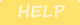
<style>
.page{position:relative;width:80px;height:25px}
.page>*{position:absolute;margin:0}
.t1{font:16px "SegoeScript-Bold";color:#fff5d9}
</style>
<div class="page">
<p class="t1" style="left:18px;top:4px;width:47px;height:14px">HELP</p>
</div>
